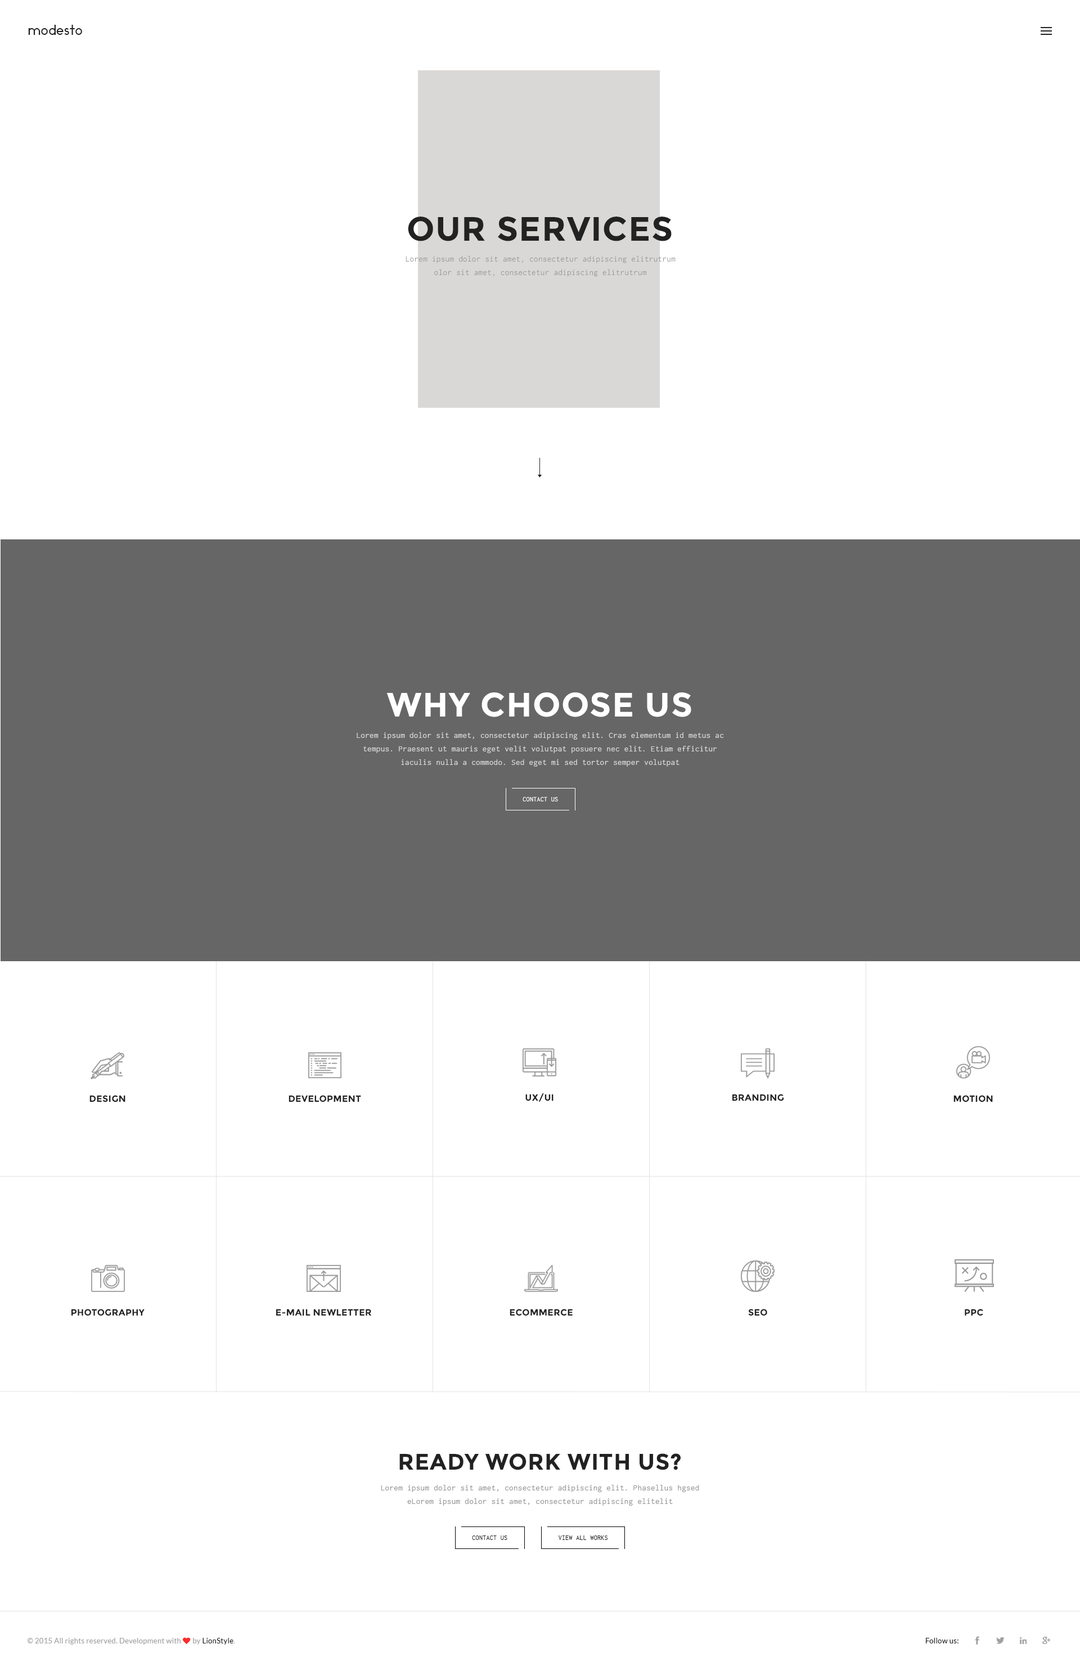
<style>
.page{position:relative;width:1080px;height:1671px;background:#ffffff}
.page>*{position:absolute;margin:0}
.t1{font:13.5px "Ikaros";letter-spacing:0.025em;color:#222222}
.t2{font:33.8px "Montserrat-Bold";letter-spacing:0.025em;color:#222222;text-transform:uppercase}
.t3{font:8.4px/13.5px "Inconsolata";letter-spacing:0.025em;color:#989898}
.t4{font:33.8px "Montserrat-Bold";letter-spacing:0.025em;color:#ffffff;text-transform:uppercase}
.t5{font:8.4px/13.5px "Inconsolata";letter-spacing:0.025em;color:#d9d9d9}
.t6{font:6.8px "Inconsolata";letter-spacing:0.025em;color:#ffffff;text-transform:uppercase}
.t7{font:9px "Montserrat-Bold";letter-spacing:0.025em;color:#222222;text-transform:uppercase}
.t8{font:22.5px "Montserrat-Bold";letter-spacing:0.025em;color:#222222;text-transform:uppercase}
.t9{font:6.8px "Inconsolata";letter-spacing:0.025em;color:#222222;text-transform:uppercase}
.t10{font:7.3px "Lato-Regular";letter-spacing:0.025em;color:#a1a1a1}
.t11{font:7.3px "FontAwesome";letter-spacing:0.025em;color:#fe2b2b}
.t12{font:7.3px "Lato-Regular";letter-spacing:0.025em;color:#222222}
.t13{font:7.3px "Lato-Regular";letter-spacing:0.025em;color:#b5b5b5}
</style>
<div class="page">
<p class="t1" style="left:28px;top:25px;width:54px;height:10px">modesto</p>
<p class="t2" style="left:408px;top:217px;width:264px;height:24px">OUR SERVICES</p>
<p class="t3" style="left:406px;top:256px;width:270px;height:21px;text-align:center">Lorem ipsum dolor sit amet, consectetur adipiscing elitrutrum olor sit amet, consectetur adipiscing elitrutrum</p>
<p class="t4" style="left:386px;top:692px;width:305px;height:25px">why choose us</p>
<p class="t5" style="left:357px;top:732px;width:367px;height:35px;text-align:center">Lorem ipsum dolor sit amet, consectetur adipiscing elit. Cras elementum id metus ac tempus. Praesent ut mauris eget velit volutpat posuere nec elit. Etiam efficitur iaculis nulla a commodo. Sed eget mi sed tortor semper volutpat</p>
<p class="t6" style="left:523px;top:797px;width:35px;height:5px">CONTact us</p>
<p class="t7" style="left:89px;top:1095px;width:36px;height:7px">Design</p>
<p class="t7" style="left:289px;top:1095px;width:72px;height:7px">development</p>
<p class="t7" style="left:525px;top:1094px;width:29px;height:8px">ux/ui</p>
<p class="t7" style="left:732px;top:1094px;width:52px;height:7px">branding</p>
<p class="t7" style="left:953px;top:1095px;width:40px;height:7px">motion</p>
<p class="t7" style="left:71px;top:1309px;width:74px;height:7px">photography</p>
<p class="t7" style="left:276px;top:1309px;width:96px;height:7px">e-mail newletter</p>
<p class="t7" style="left:510px;top:1309px;width:63px;height:7px">ecommerce</p>
<p class="t7" style="left:748px;top:1309px;width:19px;height:7px">seo</p>
<p class="t7" style="left:965px;top:1309px;width:18px;height:7px">ppc</p>
<p class="t8" style="left:399px;top:1454px;width:282px;height:16px">ready work with us?</p>
<p class="t3" style="left:381px;top:1485px;width:318px;height:21px;text-align:center">Lorem ipsum dolor sit amet, consectetur adipiscing elit. Phasellus hgsed eLorem ipsum dolor sit amet, consectetur adipiscing elitelit</p>
<p class="t9" style="left:472px;top:1536px;width:35px;height:4px">CONTact us</p>
<p class="t9" style="left:558px;top:1536px;width:50px;height:4px">view all works</p>
<p class="t10" style="left:27px;top:1637px;width:208px;height:8px">© 2015 All rights reserved. Development with <span class="t11">♥ </span>by<span class="t12"> LionStyle</span><span class="t13">.</span></p>
<p class="t12" style="left:926px;top:1638px;width:32px;height:6px">Follow us:</p>
</div>
